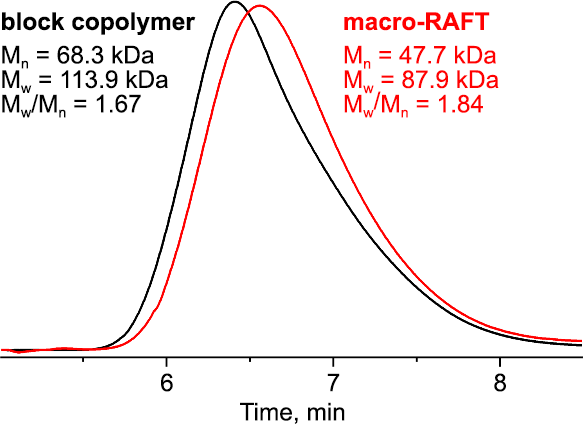
<style>
.page{position:relative;width:583px;height:424px;background:#ffffff}
.page>*{position:absolute;margin:0}
.t1{font:24.4px/24.4px "ArialMT";color:#000000}
.t2{font:24.4px/24.4px "Arial-BoldMT";color:#000000}
.t3{font:24.4px/24.4px "ArialMT";color:#ff0000}
.t4{font:24.4px/24.4px "Arial-BoldMT";color:#ff0000}
.t5{font:24.4px "ArialMT";letter-spacing:6.26em;color:#000000}
.t6{font:24.4px "ArialMT";color:#000000}
</style>
<div class="page">
<p class="t1" style="left:2px;top:12px;width:194px;height:106px"><span class="t2">block copolymer<br></span>Mn = 68.3 kDa<br>Mw = 113.9 kDa<br>Mw/Mn = 1.67</p>
<p class="t3" style="left:344px;top:12px;width:155px;height:106px"><span class="t4">macro-RAFT<br></span>Mn = 47.7 kDa<br>Mw = 87.9 kDa<br>Mw/Mn = 1.84</p>
<p class="t5" style="left:161px;top:373px;width:345px;height:19px">678</p>
<p class="t6" style="left:240px;top:402px;width:105px;height:22px">Time, min</p>
</div>
